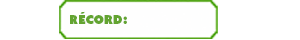
<style>
.page{position:relative;width:300px;height:40px;background:#ffffff}
.page>*{position:absolute;margin:0}
.t1{font:12.4px "AzoSansUber-Regular";letter-spacing:0.01em;color:#63a431;scale:0.95 1}
</style>
<div class="page">
<p class="t1" style="left:70px;top:11px;width:57px;height:13px">rÉCORD:</p>
</div>
